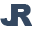
<style>
.page{position:relative;width:32px;height:32px;background:#ffffff}
.page>*{position:absolute;margin:0}
.t1{font:30px "Arial-Black";color:#344861}
</style>
<div class="page">
<p class="t1" style="left:0px;top:4px;width:18px;height:22px">J</p>
<p class="t1" style="left:11px;top:4px;width:22px;height:22px">R</p>
</div>
